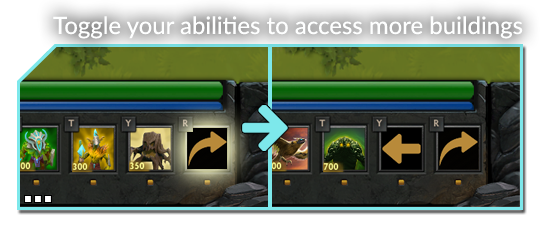
<style>
.page{position:relative;width:540px;height:230px}
.page>*{position:absolute;margin:0}
.t1{font:24px "Lato-Regular";color:#feffff}
</style>
<div class="page">
<p class="t1" style="left:53px;top:16px;width:470px;height:23px">Toggle your abilities to access more buildings</p>
</div>
